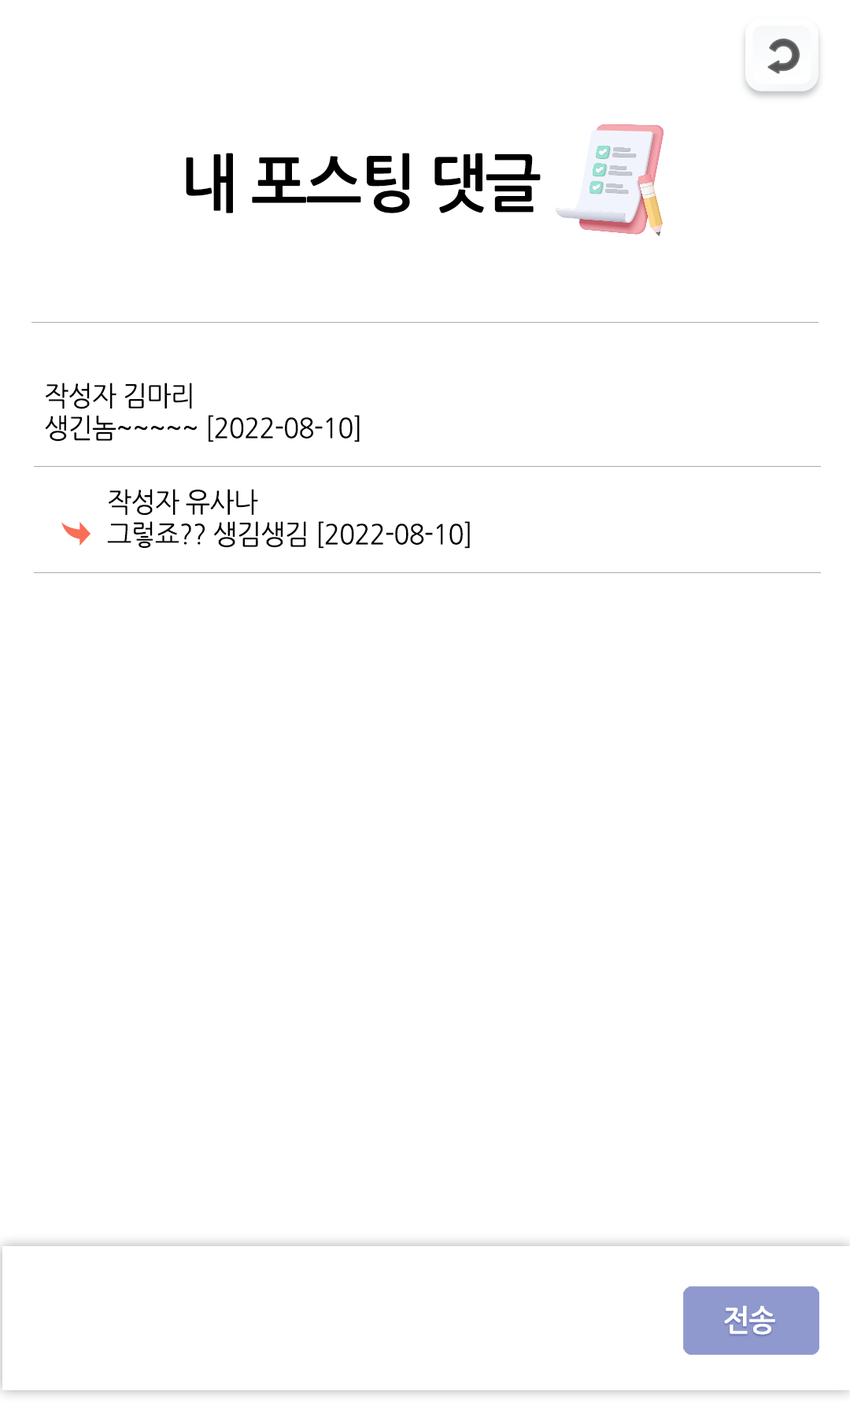
<style>
.page{position:relative;width:850px;height:1402px;background:#ffffff}
.page>*{position:absolute;margin:0}
.t1{font:63px "NanumGothicBold";letter-spacing:-0.025em;color:#000000;scale:0.95 1}
.t2{font:27.6px "NanumGothic";letter-spacing:-0.025em;color:#000000;scale:0.95 1}
.t3{font:29.9px "NanumGothicBold";letter-spacing:-0.025em;color:#ffffff;scale:0.95 1}
</style>
<div class="page">
<p class="t1" style="left:186px;top:153px;width:355px;height:60px">내 포스팅 댓글</p>
<p class="t2" style="left:46px;top:383px;width:146px;height:26px">작성자 김마리</p>
<p class="t2" style="left:45px;top:415px;width:315px;height:27px">생긴놈~~~~~ [2022-08-10]</p>
<p class="t2" style="left:109px;top:489px;width:149px;height:27px">작성자 유사나</p>
<p class="t2" style="left:107px;top:521px;width:363px;height:28px">그렇죠?? 생김생김 [2022-08-10]</p>
<p class="t3" style="left:724px;top:1305px;width:52px;height:30px">전송</p>
</div>
